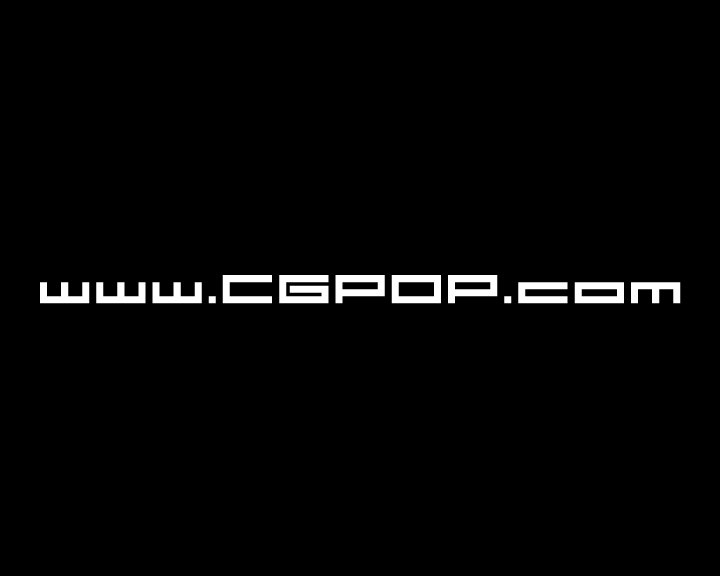
<style>
.page{position:relative;width:720px;height:576px;background:#000000}
.page>*{position:absolute;margin:0}
.t1{font:42.2px "04b31";color:#ffffff}
</style>
<div class="page">
<p class="t1" style="left:40px;top:275px;width:641px;height:29px">www.CGPOP.com</p>
</div>
